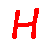
<style>
.page{position:relative;width:50px;height:50px;background:#ffffff}
.page>*{position:absolute;margin:0}
.t1{font:36px "SegoeScript";color:#ff0000;font-weight:bold}
</style>
<div class="page">
<p class="t1" style="left:12px;top:8px;width:27px;height:31px">H</p>
</div>
